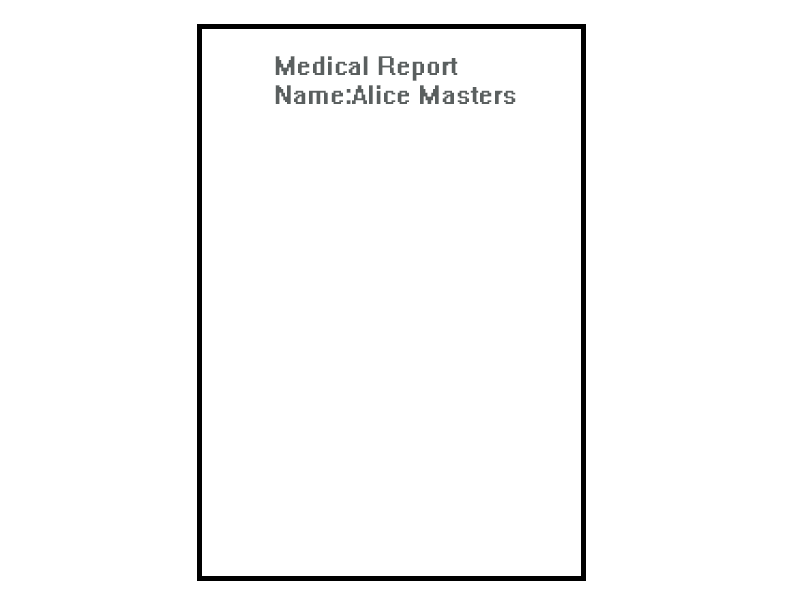
<style>
.page{position:relative;width:800px;height:600px;background:#ffffff}
.page>*{position:absolute;margin:0}
.t1{font:24px "System";color:#5a5f5f}
</style>
<div class="page">
<p class="t1" style="left:275px;top:56px;width:241px;height:48px">Medical Report<br>Name:Alice Masters</p>
</div>
